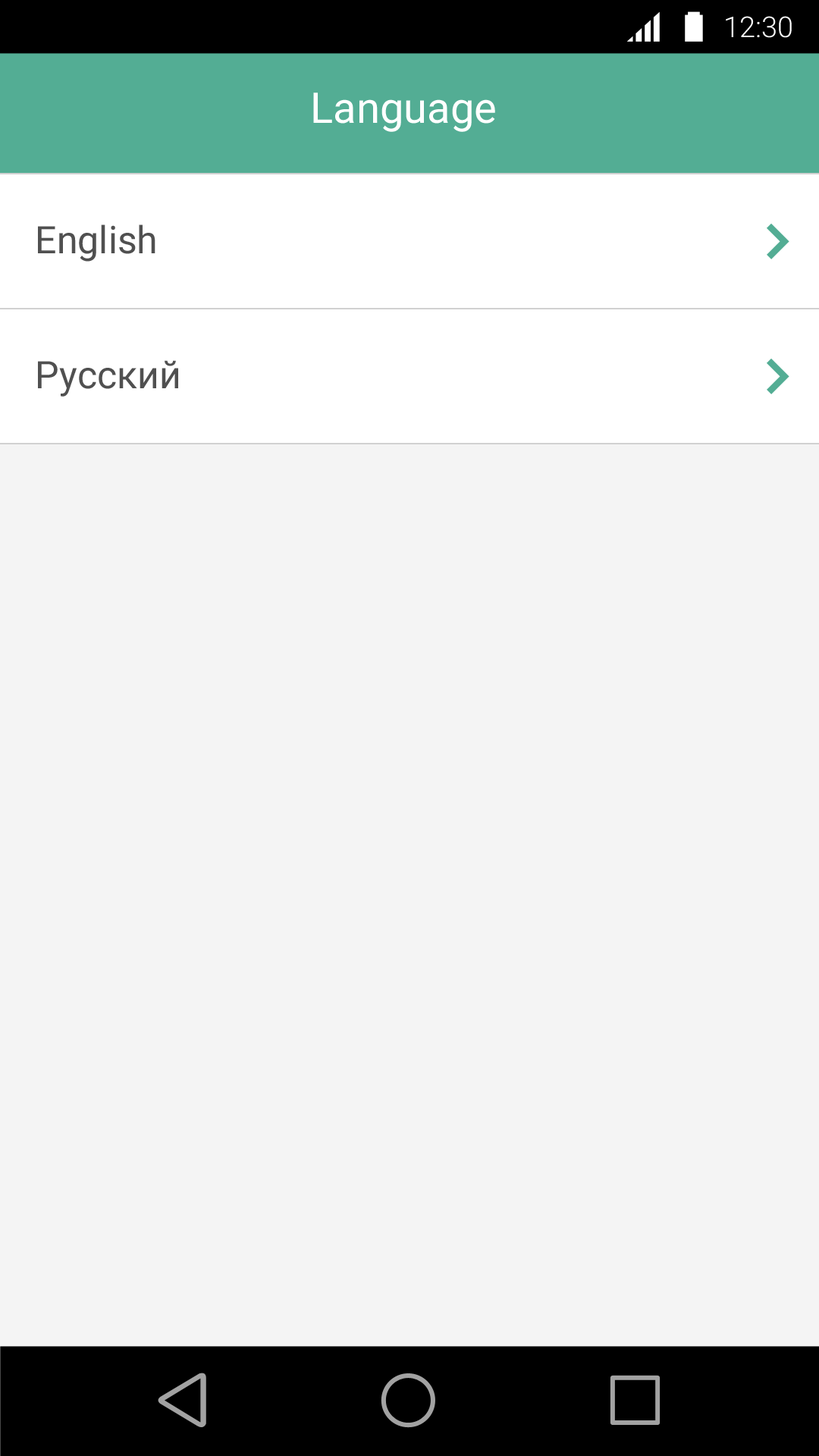
<style>
.page{position:relative;width:819px;height:1456px;background:#f4f4f4}
.page>*{position:absolute;margin:0}
.t1{font:28.8px "Roboto-Light";color:#ffffff}
.t2{font:42.5px "Roboto-Regular";color:#ffffff}
.t3{font:37.9px "Roboto-Regular";color:#505050}
</style>
<div class="page">
<p class="t1" style="left:726px;top:16px;width:66px;height:22px">12:30</p>
<p class="t2" style="left:313px;top:93px;width:182px;height:39px">Language</p>
<p class="t3" style="left:38px;top:224px;width:117px;height:38px">English</p>
<p class="t3" style="left:38px;top:360px;width:140px;height:37px">Русский</p>
</div>
